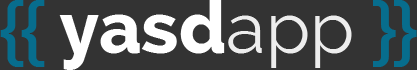
<style>
.page{position:relative;width:417px;height:70px;background:#333333}
.page>*{position:absolute;margin:0}
.t1{font:72px "Raleway-ExtraBold";color:#ffffff}
.t2{font:72px "HelveticaNeue-Medium";color:#076d8d}
.t3{font:72px "Raleway";color:#ededed}
</style>
<div class="page">
<p class="t1" style="left:0px;top:0px;width:417px;height:70px"><span class="t2">{{ </span>yasd<span class="t3">app</span><span class="t2"> }}</span></p>
</div>
